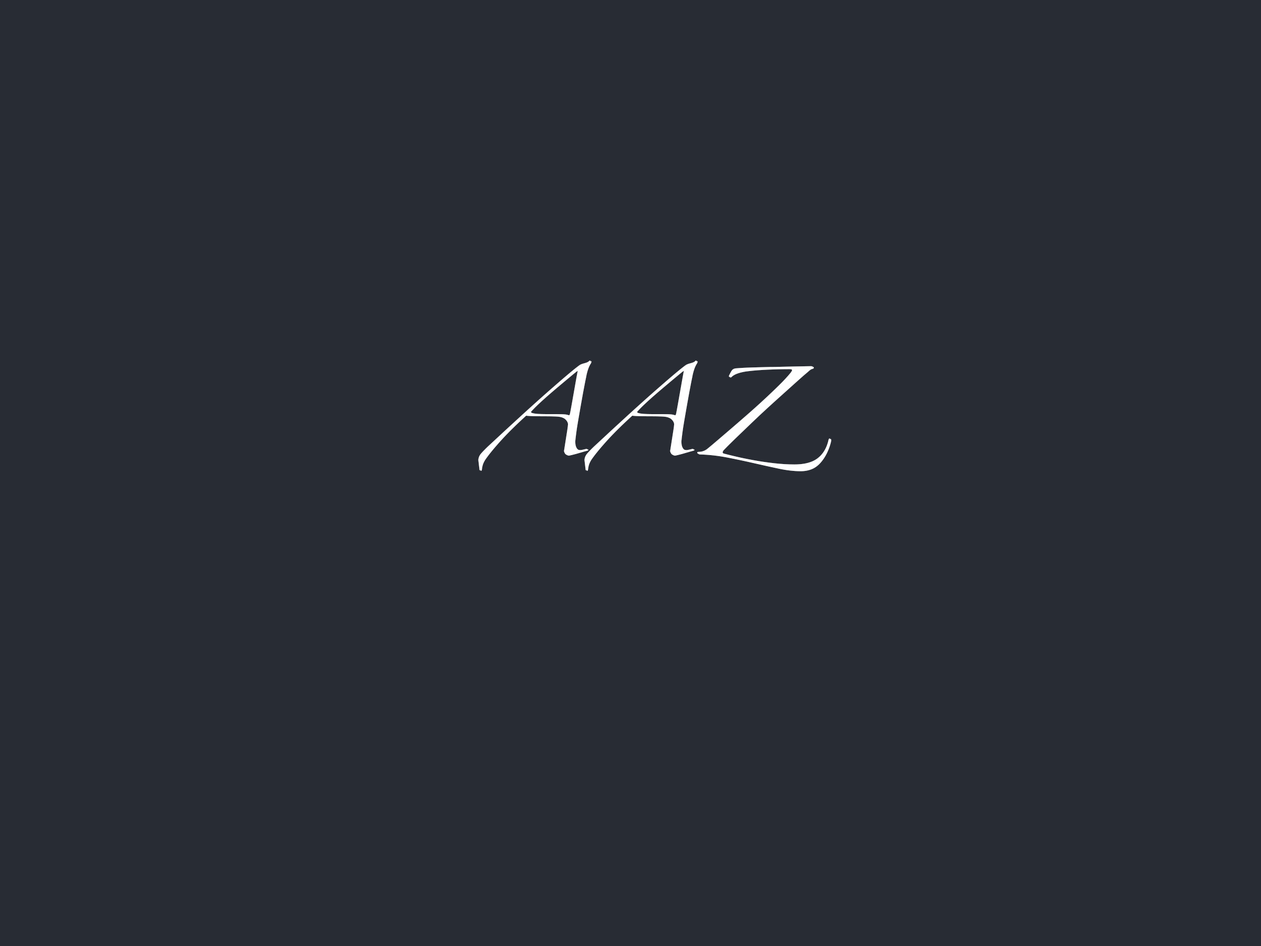
<style>
.page{position:relative;width:1261px;height:946px;background:#282c34}
.page>*{position:absolute;margin:0}
.t1{font:79.9px "Zapfino";color:#ffffff}
</style>
<div class="page">
<p class="t1" style="left:478px;top:360px;width:353px;height:111px">AAZ</p>
<p class="t1" style="left:479px;top:361px;width:353px;height:110px">AAZ</p>
</div>
